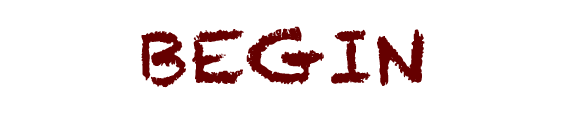
<style>
.page{position:relative;width:567px;height:113px;background:#ffffff}
.page>*{position:absolute;margin:0}
.t1{font:72px "Chalkduster";letter-spacing:0.005em;color:#660000;font-weight:bold}
</style>
<div class="page">
<p class="t1" style="left:141px;top:26px;width:284px;height:62px">BEGIN</p>
</div>
